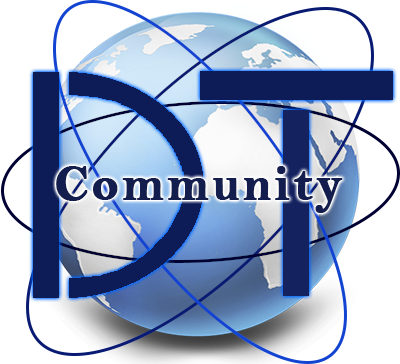
<style>
.page{position:relative;width:400px;height:364px;background:#ffffff}
.page>*{position:absolute;margin:0}
.t1{font:50px "BellMTBold";letter-spacing:0.05em;color:#131e4e;font-weight:bold}
</style>
<div class="page">
<p class="t1" style="left:56px;top:166px;width:287px;height:47px">Community</p>
</div>
